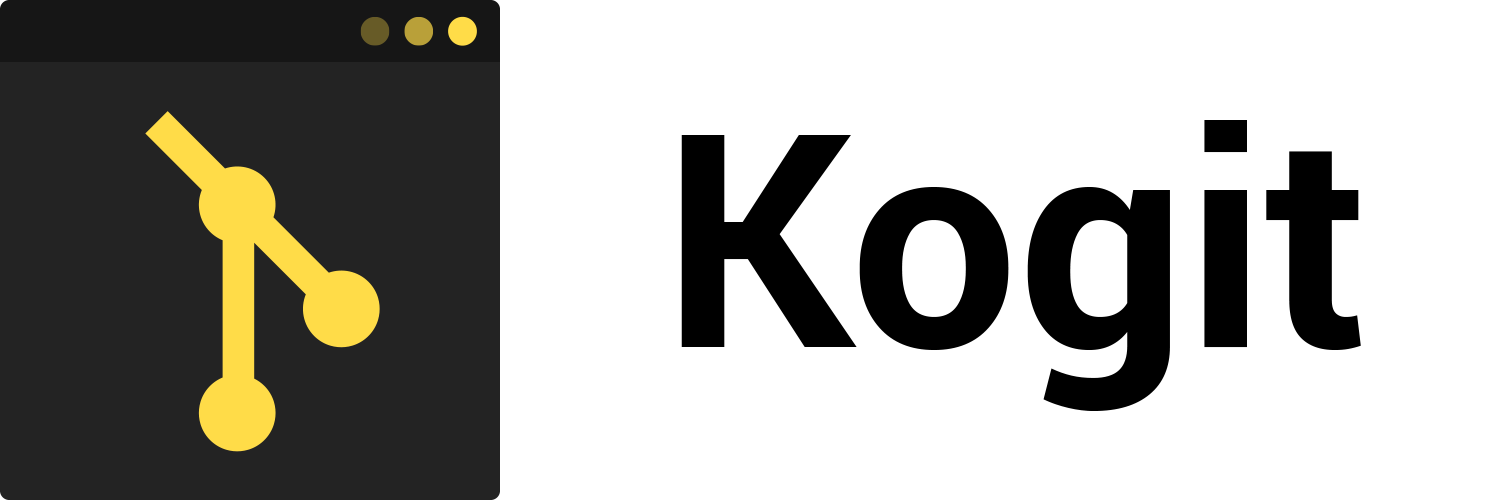
<style>
.page{position:relative;width:1500px;height:500px;background:#ffffff}
.page>*{position:absolute;margin:0}
.t1{font:297.8px "Roboto-Bold";color:#000000}
</style>
<div class="page">
<p class="t1" style="left:681px;top:120px;width:680px;height:291px">Kogit</p>
</div>
